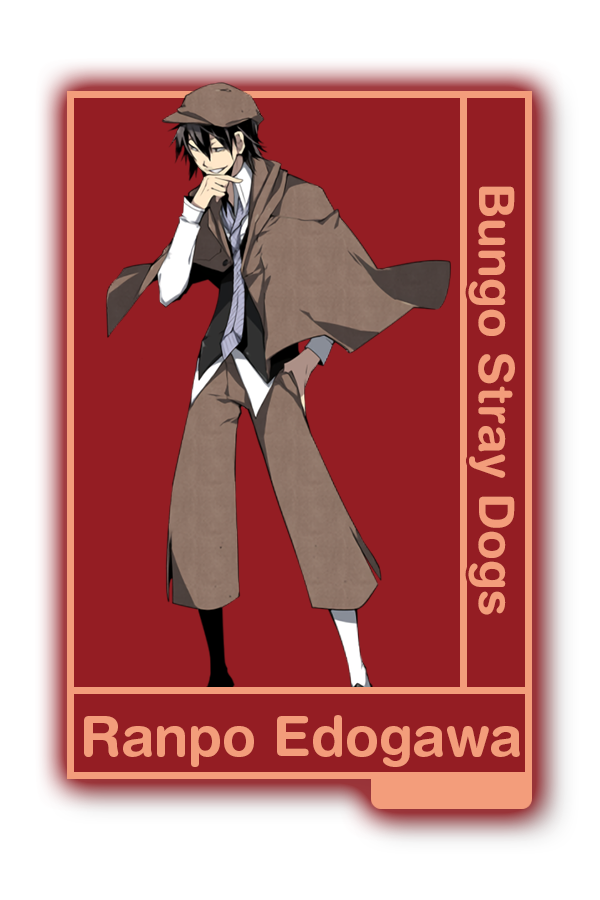
<style>
.page{position:relative;width:600px;height:900px;background:#941d23}
.page>*{position:absolute;margin:0}
.t1{font:48.8px "HelveticaRounded-Bold";color:#f39d7b}
.t2{font:55.4px "HelveticaRounded-Bold";color:#f39d7b}
</style>
<div class="page">
<p class="t1" style="left:468px;top:186px;width:47px;height:429px;rotate:90deg">Bungo Stray Dogs</p>
<p class="t2" style="left:84px;top:715px;width:436px;height:52px">Ranpo Edogawa</p>
</div>
